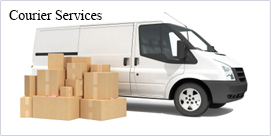
<style>
.page{position:relative;width:271px;height:136px;background:#ffffff}
.page>*{position:absolute;margin:0}
.t1{font:14px "TimesNewRomanPSMT";color:#000000}
</style>
<div class="page">
<p class="t1" style="left:9px;top:10px;width:93px;height:10px">Courier Services</p>
</div>
